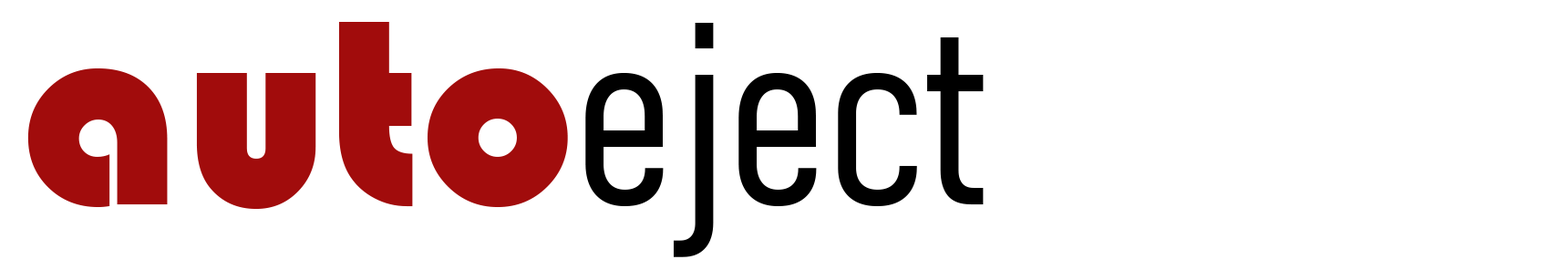
<style>
.page{position:relative;width:1568px;height:270px;background:#ffffff}
.page>*{position:absolute;margin:0}
.t1{font:255.3px "Bahnschrift-LightCondensed";color:#000000}
.t2{font:273.5px "Bauhaus93";color:#a10c0c}
</style>
<div class="page">
<p class="t1" style="left:27px;top:22px;width:957px;height:235px"><span class="t2">auto</span>eject</p>
</div>
